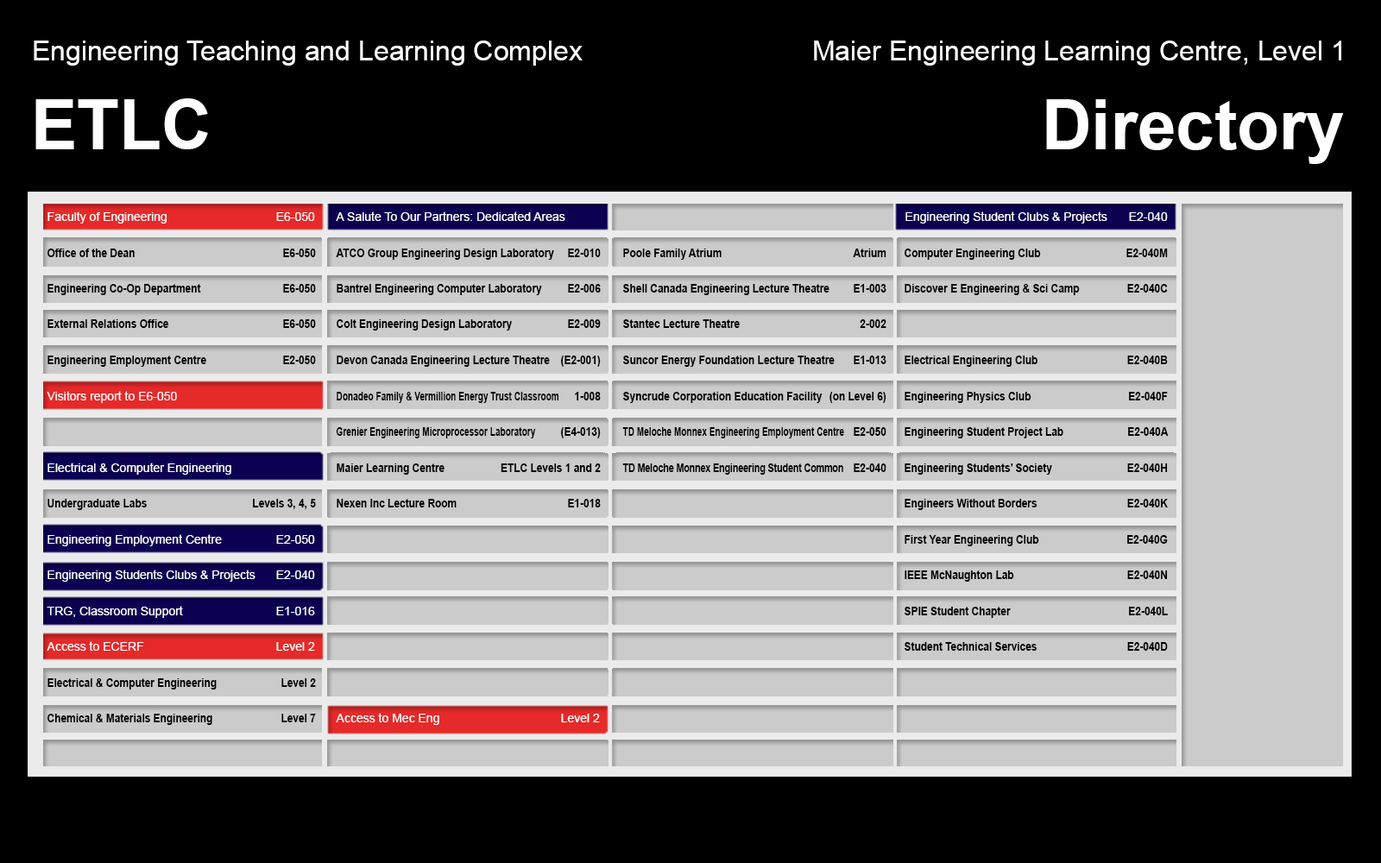
<style>
.page{position:relative;width:1381px;height:863px;background:#000000}
.page>*{position:absolute;margin:0}
.t1{font:27.6px "ArialMT";color:#fefeff}
.t2{font:69.1px "Arial-BoldMT";color:#fefeff}
.t3{font:12.1px "ArialMT";color:#fefeff}
.t4{font:12.1px/32.5px "Arial-BoldMT";color:#000000;scale:0.85 1}
.t5{font:12.1px/32.5px "Arial-BoldMT";color:#000000;scale:0.72 1}
.t6{font:12.1px/32.5px "Arial-BoldMT";color:#000000;scale:0.75 1}
</style>
<div class="page">
<p class="t1" style="left:34px;top:41px;width:549px;height:25px">Engineering Teaching and Learning Complex</p>
<p class="t1" style="left:814px;top:41px;width:528px;height:25px">Maier Engineering Learning Centre, Level 1</p>
<p class="t2" style="left:35px;top:98px;width:173px;height:51px">ETLC</p>
<p class="t2" style="left:1046px;top:99px;width:298px;height:65px">Directory</p>
<p class="t3" style="left:906px;top:212px;width:202px;height:12px">Engineering Student Clubs &amp; Projects</p>
<p class="t3" style="left:1129px;top:212px;width:39px;height:9px">E2-040</p>
<p class="t4" style="left:47px;top:249px;width:170px;height:476px">Office of the Dean<br>Engineering Co-Op Department<br>External Relations Office<br>Engineering Employment Centre<br><br><br><br>Undergraduate Labs<br><br><br><br><br>Electrical &amp; Computer Engineering<br>Chemical &amp; Materials Engineering</p>
<p class="t4" style="left:336px;top:249px;width:223px;height:259px">ATCO Group Engineering Design Laboratory<br>Bantrel Engineering Computer Laboratory<br>Colt Engineering Design Laboratory<br>Devon Canada Engineering Lecture Theatre<br><span class="t5">Donadeo Family &amp; Vermillion Energy Trust Classroom<br>Grenier Engineering Microprocessor Laboratory<br></span>Maier Learning Centre<br>Nexen Inc Lecture Room</p>
<p class="t4" style="left:501px;top:249px;width:100px;height:259px;text-align:right">E2-010<br>E2-006<br>E2-009<br>(E2-001)<br>1-008<br>(E4-013)<br>ETLC Levels 1 and 2<br>E1-018</p>
<p class="t4" style="left:622px;top:249px;width:222px;height:226px">Poole Family Atrium<br>Shell Canada Engineering Lecture Theatre<br>Stantec Lecture Theatre<br>Suncor Energy Foundation Lecture Theatre<br>Syncrude Corporation Education Facility<br><span class="t5">TD Meloche Monnex Engineering Employment Centre<br></span><span class="t6">TD Meloche Monnex Engineering Student Common</span></p>
<p class="t4" style="left:830px;top:249px;width:57px;height:223px;text-align:right">Atrium<br>E1-003<br>2-002<br>E1-013<br>(on Level 6)<br>E2-050<br>E2-040</p>
<p class="t4" style="left:905px;top:249px;width:175px;height:402px">Computer Engineering Club<br>Discover E Engineering &amp; Sci Camp<br><br>Electrical Engineering Club<br>Engineering Physics Club<br>Engineering Student Project Lab<br>Engineering Students’ Society<br>Engineers Without Borders<br>First Year Engineering Club<br>IEEE McNaughton Lab<br>SPIE Student Chapter<br>Student Technical Services</p>
<p class="t4" style="left:1127px;top:249px;width:42px;height:402px;text-align:right">E2-040M<br>E2-040C<br><br>E2-040B<br>E2-040F<br>E2-040A<br>E2-040H<br>E2-040K<br>E2-040G<br>E2-040N<br>E2-040L<br>E2-040D</p>
<p class="t3" style="left:561px;top:714px;width:39px;height:9px">Level 2</p>
</div>
